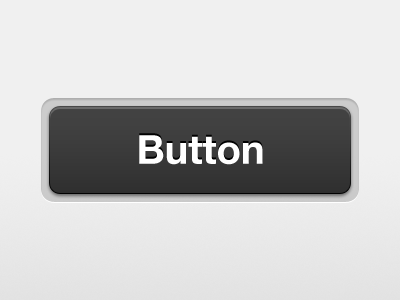
<style>
.page{position:relative;width:400px;height:300px;background:#f0f0f0}
.page>*{position:absolute;margin:0}
.t1{font:40px "HelveticaNeue-Bold";color:#ffffff}
</style>
<div class="page">
<p class="t1" style="left:139px;top:135px;width:124px;height:30px">Button</p>
</div>
